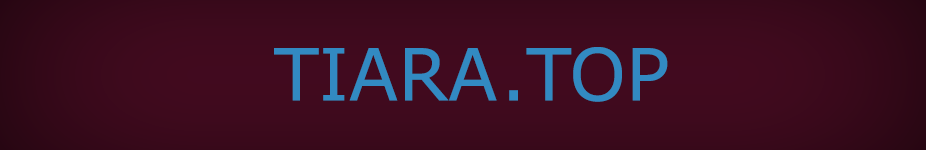
<style>
.page{position:relative;width:926px;height:150px}
.page>*{position:absolute;margin:0}
.t1{font:72px "Verdana";color:#328ac2}
</style>
<div class="page">
<p class="t1" style="left:274px;top:48px;width:223px;height:53px">TIARA</p>
<p class="t1" style="left:509px;top:47px;width:159px;height:55px">.TOP</p>
</div>
